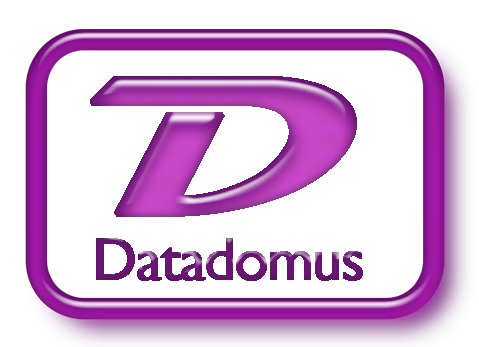
<style>
.page{position:relative;width:479px;height:347px;background:#ffffff}
.page>*{position:absolute;margin:0}
.t1{font:197.3px "Magneto-Bold";letter-spacing:-0.04em;font-weight:bold;scale:1.56 1}
.t2{font:60px "GillSansMT";letter-spacing:-0.04em;color:#65166f;font-weight:bold}
</style>
<div class="page">
<p class="t1" style="left:90px;top:76px;width:267px;height:141px">D</p>
<p class="t2" style="left:96px;top:238px;width:267px;height:43px">Datadomus</p>
</div>
